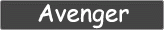
<style>
.page{position:relative;width:164px;height:30px;background:#444244}
.page>*{position:absolute;margin:0}
.t1{font:24px "ComicSansMS";color:#ffffff}
</style>
<div class="page">
<p class="t1" style="left:38px;top:4px;width:91px;height:25px">Avenger</p>
</div>
